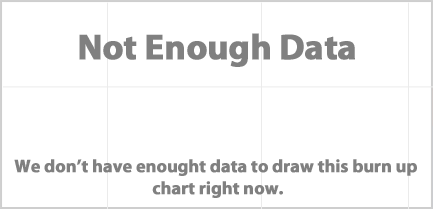
<style>
.page{position:relative;width:433px;height:209px;background:#ffffff}
.page>*{position:absolute;margin:0}
.t1{font:36px "MyriadPro-Bold";letter-spacing:-0.015em;color:#808080;font-weight:bold}
.t2{font:18px "MyriadPro-Bold";letter-spacing:-0.015em;color:#808080;font-weight:bold}
</style>
<div class="page">
<p class="t1" style="left:79px;top:33px;width:276px;height:34px">Not Enough Data</p>
<p class="t2" style="left:14px;top:159px;width:403px;height:39px;text-align:center">We don’t have enought data to draw this burn up <br>chart right now.</p>
</div>
